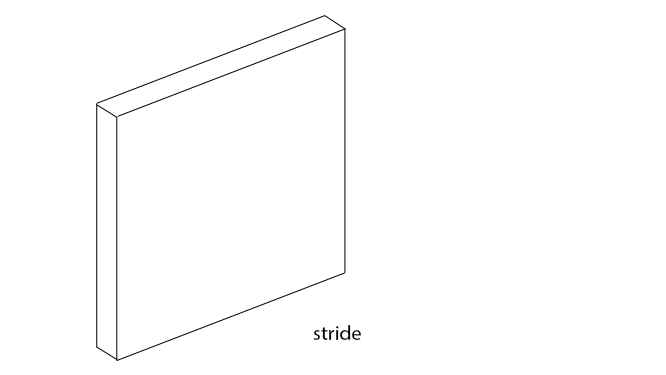
<style>
.page{position:relative;width:666px;height:375px;background:#ffffff}
.page>*{position:absolute;margin:0}
.t1{font:20.8px "MyriadPro-Regular";color:#000000}
</style>
<div class="page">
<p class="t1" style="left:313px;top:325px;width:48px;height:15px">stride</p>
</div>
